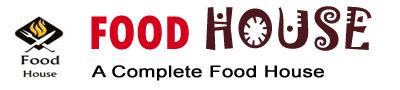
<style>
.page{position:relative;width:400px;height:90px;background:#ffffff}
.page>*{position:absolute;margin:0}
.t1{font:50px "Jokerman-Regular";color:#4c181e}
.t2{font:50px "TwCenMT-CondensedExtraBold";color:#d7001b}
.t3{font:16px "ArialMT";color:#000000;font-weight:bold;scale:1.27 1}
</style>
<div class="page">
<p class="t1" style="left:91px;top:6px;width:281px;height:45px"><span class="t2">FOOD </span>HOUSE</p>
<p class="t3" style="left:91px;top:65px;width:233px;height:16px">A Complete Food House</p>
</div>
